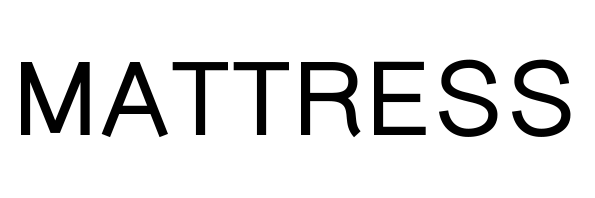
<style>
.page{position:relative;width:595px;height:198px;background:#ffffff}
.page>*{position:absolute;margin:0}
.t1{font:110px "CSPraJad-bold";color:#000000}
</style>
<div class="page">
<p class="t1" style="left:21px;top:59px;width:550px;height:79px">MATTRESS</p>
</div>
